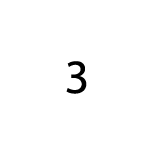
<style>
.page{position:relative;width:150px;height:150px;background:#ffffff}
.page>*{position:absolute;margin:0}
.t1{font:48px "MyriadPro-Regular";color:#000000}
</style>
<div class="page">
<p class="t1" style="left:66px;top:61px;width:21px;height:33px">3</p>
</div>
